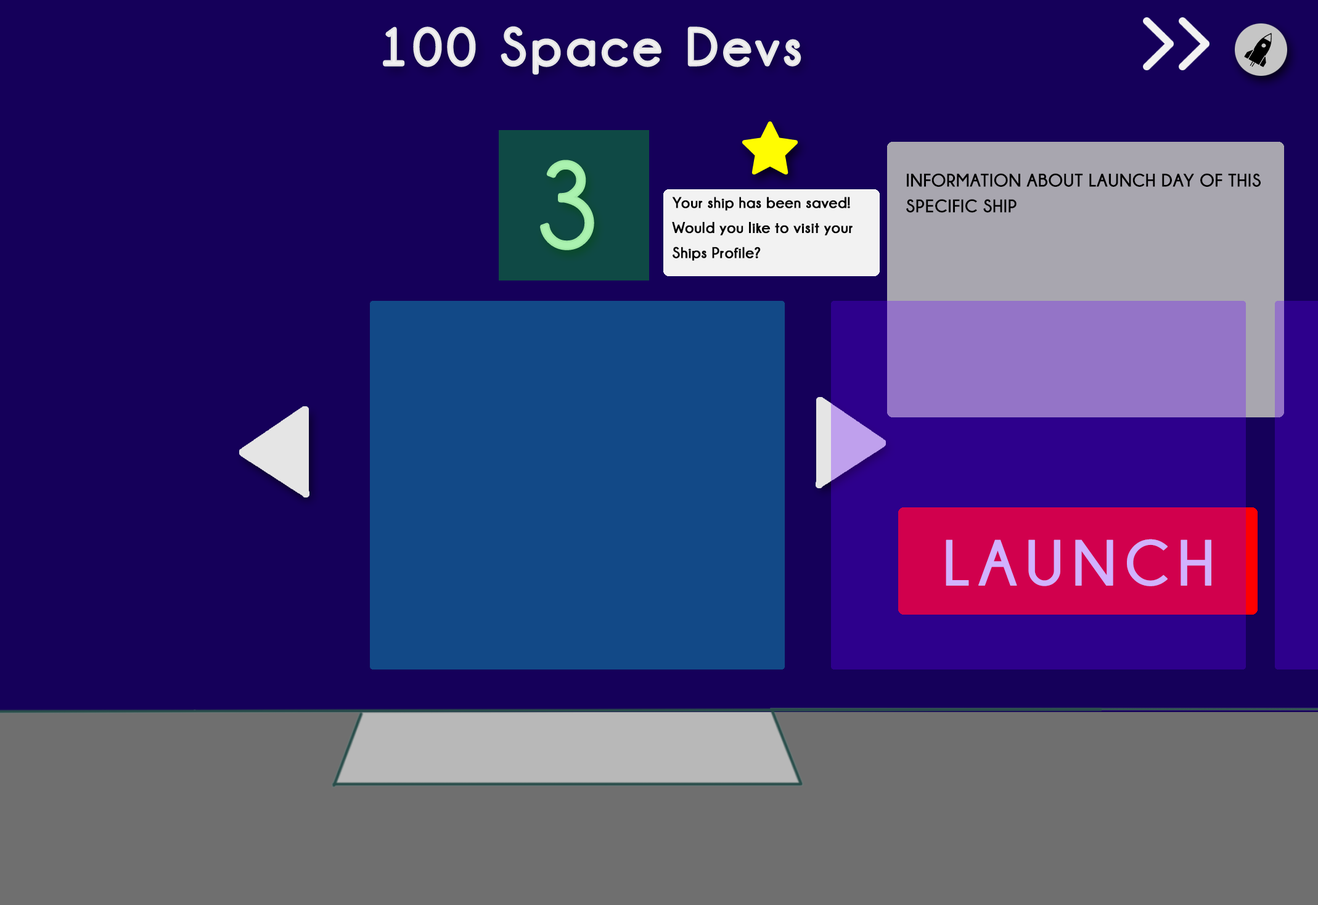
<style>
.page{position:relative;width:1318px;height:905px;background:#15005a}
.page>*{position:absolute;margin:0}
.t1{font:51.4px "Champagne&Limousines";letter-spacing:0.11em;color:#f1f1f1;font-weight:bold}
.t2{font:120.7px "Champagne&Limousines";letter-spacing:0.01em;color:#aaf2af;font-weight:bold}
.t3{font:18px/25.7px "Champagne&Limousines-Bold";letter-spacing:0.01em;color:#010101;font-weight:bold}
.t4{font:15.4px/12.8px "Champagne&Limousines-Bold";letter-spacing:0.01em;color:#050505;font-weight:bold}
.t5{font:64.2px "Champagne&Limousines-Bold";letter-spacing:0.11em;color:#d1b2ff;font-weight:bold}
</style>
<div class="page">
<p class="t1" style="left:385px;top:28px;width:414px;height:45px">100 Space Devs</p>
<p class="t2" style="left:542px;top:161px;width:50px;height:87px">3</p>
<p class="t3" style="left:906px;top:173px;width:355px;height:40px">INFORMATION ABOUT LAUNCH DAY OF THIS SPECIFIC SHIP</p>
<p class="t4" style="left:672px;top:197px;width:181px;height:64px">Your ship has been saved!<br>Would you like to visit your<br>Ships Profile?</p>
<p class="t5" style="left:946px;top:539px;width:265px;height:47px">LAUNCH</p>
</div>
